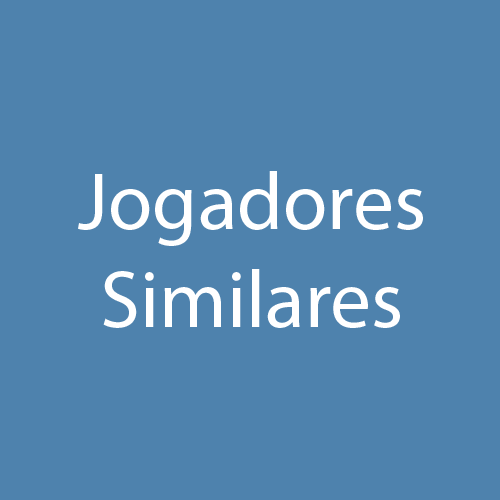
<style>
.page{position:relative;width:500px;height:500px;background:#4e82ad}
.page>*{position:absolute;margin:0}
.t1{font:81.3px "MyriadPro-Regular";color:#ffffff}
</style>
<div class="page">
<p class="t1" style="left:78px;top:171px;width:345px;height:157px;text-align:center">Jogadores<br>Similares</p>
</div>
